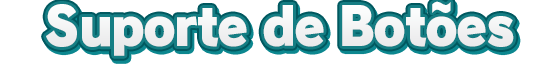
<style>
.page{position:relative;width:560px;height:66px;background:#ffffff}
.page>*{position:absolute;margin:0}
.t1{font:52px "RodinPro-UB";letter-spacing:-0.039em;color:#f2f2f3;scale:0.95 1}
</style>
<div class="page">
<p class="t1" style="left:46px;top:1px;width:468px;height:55px">Suporte de Botões</p>
</div>
